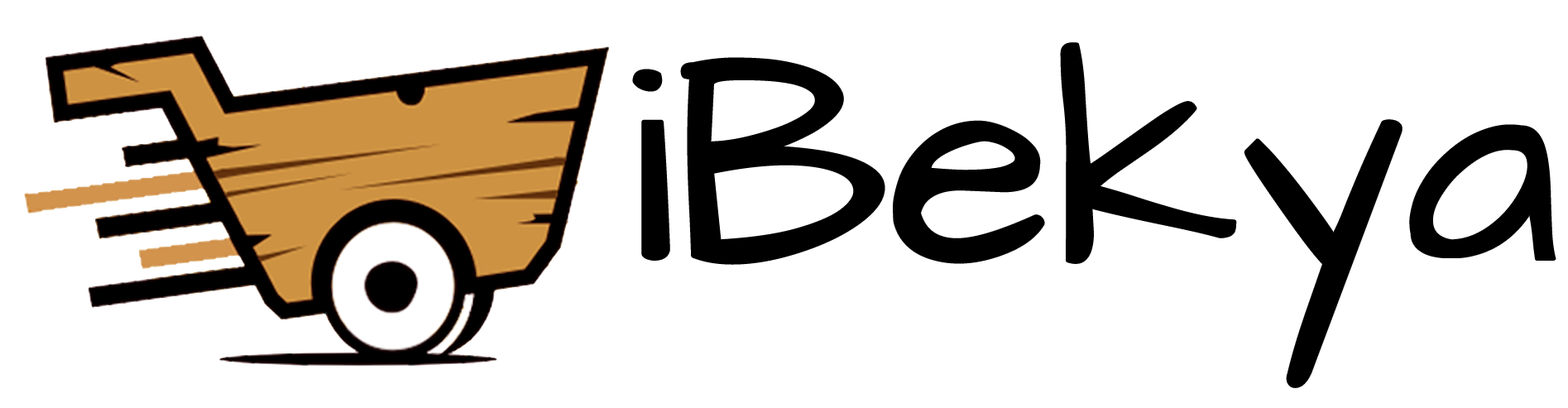
<style>
.page{position:relative;width:1568px;height:408px;background:#ffffff}
.page>*{position:absolute;margin:0}
.t1{font:303.2px "ArchitectsDaughter";color:#000000}
</style>
<div class="page">
<p class="t1" style="left:634px;top:44px;width:921px;height:342px">iBekya</p>
</div>
